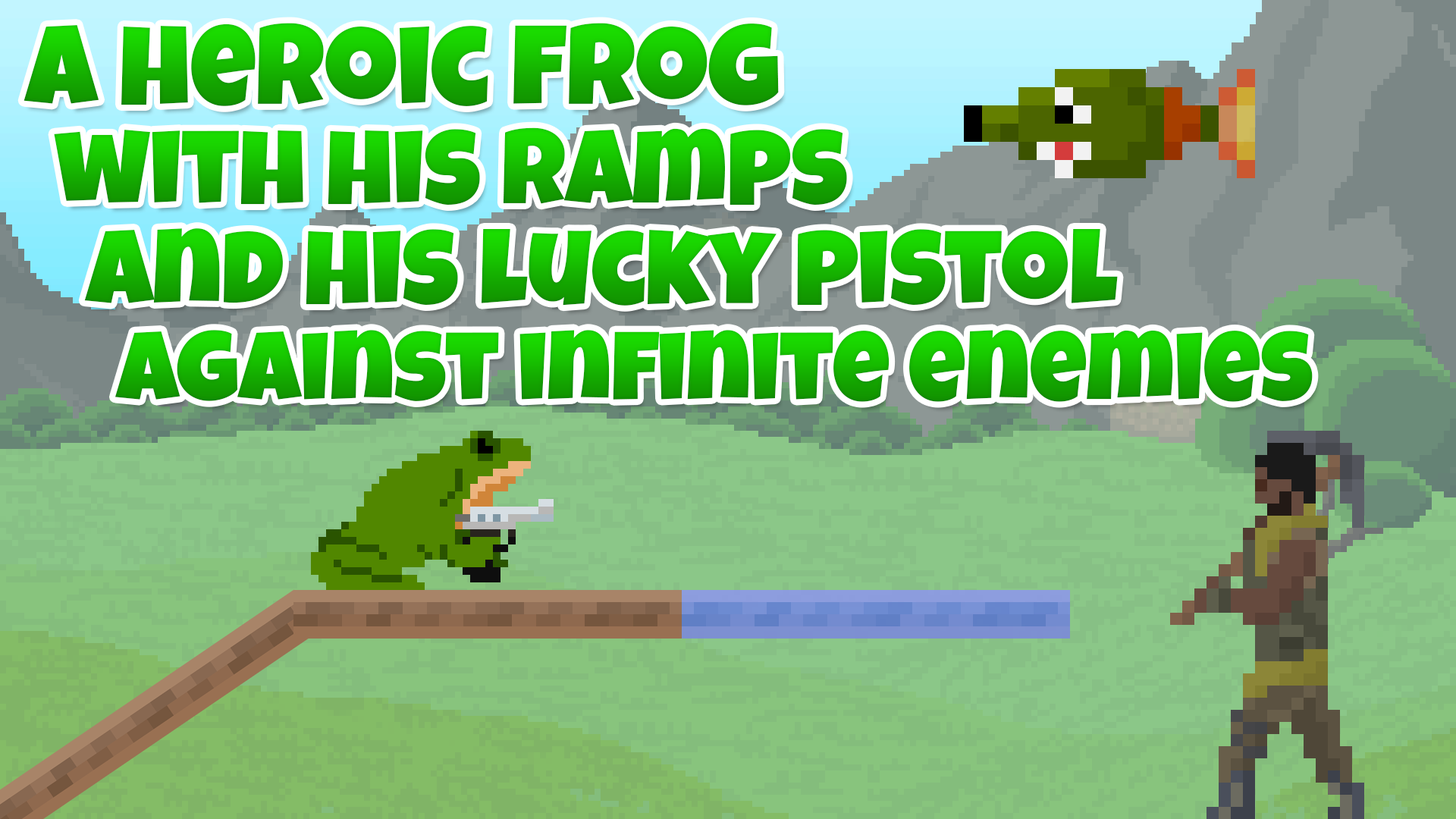
<style>
.page{position:relative;width:1456px;height:819px}
.page>*{position:absolute;margin:0}
.t1{font:113.7px "LuckiestGuy-Regular"}
.t2{font:106.2px "LuckiestGuy-Regular"}
.t3{font:98.6px "LuckiestGuy-Regular"}
</style>
<div class="page">
<p class="t1" style="left:24px;top:23px;width:755px;height:83px">a heroic frog</p>
<p class="t2" style="left:54px;top:127px;width:793px;height:78px">with his ramps</p>
<p class="t2" style="left:84px;top:228px;width:1034px;height:78px">and his lucky pistol</p>
<p class="t3" style="left:115px;top:330px;width:1198px;height:72px">against infinite enemies</p>
</div>
